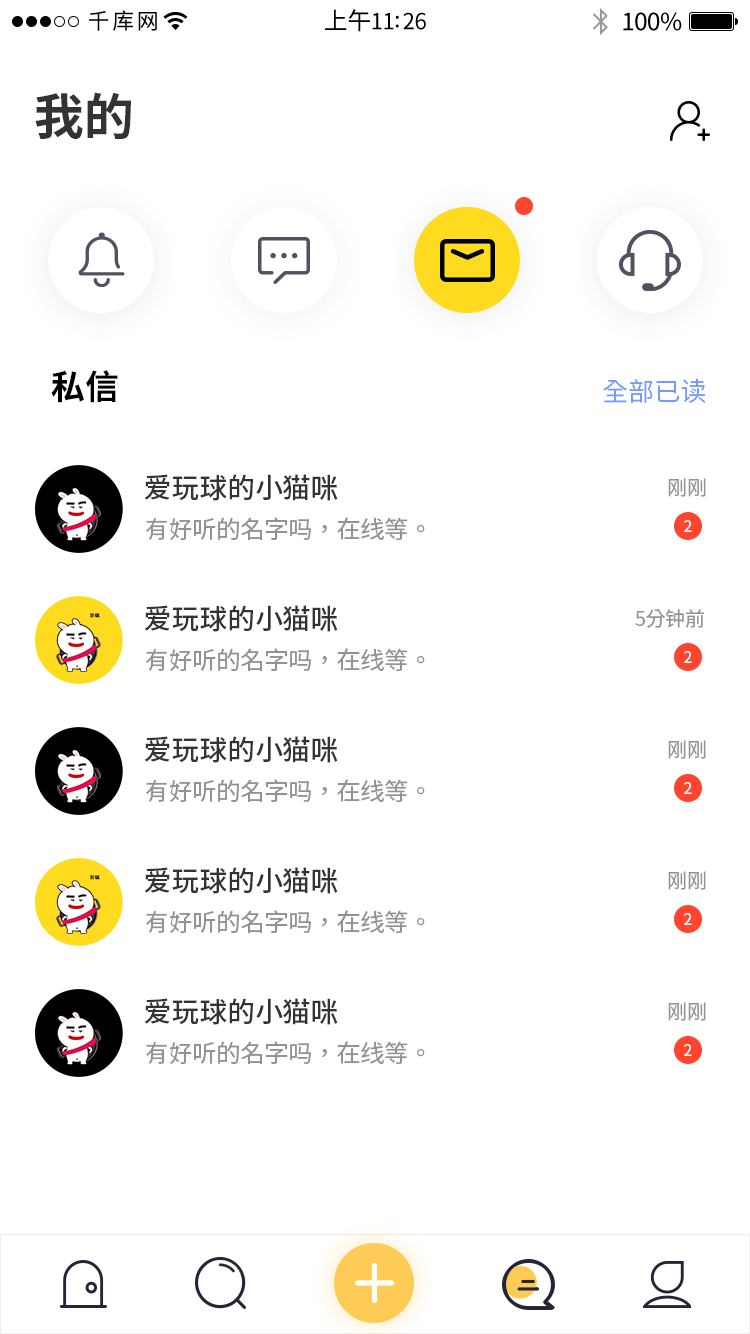
<style>
.page{position:relative;width:750px;height:1334px;background:#ffffff}
.page>*{position:absolute;margin:0}
.t1{font:50px "SourceHanSansSC-Bold";color:#333333}
.t2{font:34px "SourceHanSansSC-Bold";color:#000000}
.t3{font:26px "SourceHanSansSC-Regular";color:#759aff}
.t4{font:27.8px "SourceHanSansSC-Medium";color:#333333}
.t5{font:20px "SourceHanSansSC-Regular";color:#929292}
.t6{font:24px "SourceHanSansSC-Regular";color:#929292}
.t7{font:15.8px "SourceHanSansSC-Regular";color:#ffffff}
</style>
<div class="page">
<p class="t1" style="left:35px;top:92px;width:96px;height:47px">我的</p>
<p class="t2" style="left:51px;top:370px;width:67px;height:33px">私信</p>
<p class="t3" style="left:603px;top:378px;width:103px;height:25px">全部已读</p>
<p class="t4" style="left:144px;top:474px;width:194px;height:27px">爱玩球的小猫咪</p>
<p class="t5" style="left:668px;top:478px;width:38px;height:19px">刚刚</p>
<p class="t6" style="left:146px;top:517px;width:279px;height:23px">有好听的名字吗，在线等。</p>
<p class="t7" style="left:684px;top:520px;width:8px;height:12px">2</p>
<p class="t4" style="left:144px;top:605px;width:194px;height:27px">爱玩球的小猫咪</p>
<p class="t5" style="left:635px;top:609px;width:69px;height:19px">5分钟前</p>
<p class="t6" style="left:146px;top:648px;width:279px;height:23px">有好听的名字吗，在线等。</p>
<p class="t7" style="left:684px;top:651px;width:8px;height:12px">2</p>
<p class="t4" style="left:144px;top:736px;width:194px;height:27px">爱玩球的小猫咪</p>
<p class="t5" style="left:668px;top:740px;width:38px;height:19px">刚刚</p>
<p class="t6" style="left:146px;top:779px;width:279px;height:23px">有好听的名字吗，在线等。</p>
<p class="t7" style="left:684px;top:782px;width:8px;height:12px">2</p>
<p class="t4" style="left:144px;top:867px;width:194px;height:27px">爱玩球的小猫咪</p>
<p class="t5" style="left:668px;top:871px;width:38px;height:19px">刚刚</p>
<p class="t6" style="left:146px;top:910px;width:279px;height:23px">有好听的名字吗，在线等。</p>
<p class="t7" style="left:684px;top:913px;width:8px;height:12px">2</p>
<p class="t4" style="left:144px;top:998px;width:194px;height:27px">爱玩球的小猫咪</p>
<p class="t5" style="left:668px;top:1002px;width:38px;height:19px">刚刚</p>
<p class="t6" style="left:146px;top:1041px;width:279px;height:23px">有好听的名字吗，在线等。</p>
<p class="t7" style="left:684px;top:1044px;width:8px;height:12px">2</p>
</div>
